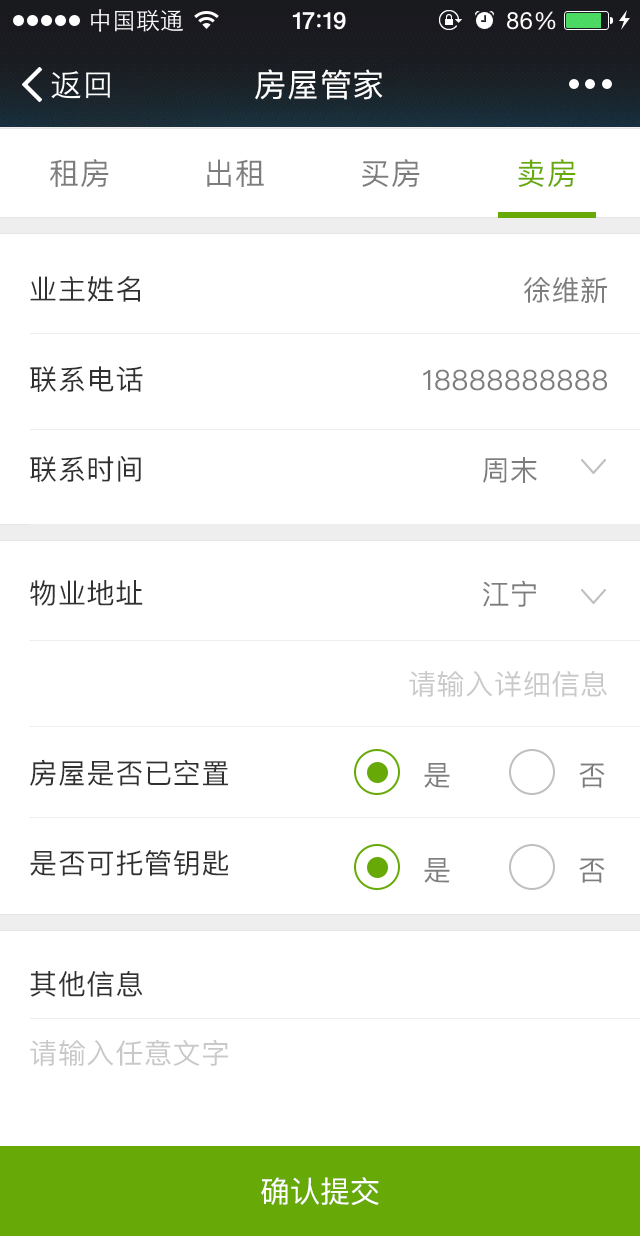
<style>
.page{position:relative;width:640px;height:1236px;background:#ffffff}
.page>*{position:absolute;margin:0}
.t1{font:32px "PingFangSC-Regular";letter-spacing:0.025em;color:#ffffff}
.t2{font:30px "PingFangSC-Regular";letter-spacing:0.025em;color:#7d7d7d}
.t3{font:30px "PingFangSC-Regular";letter-spacing:0.025em;color:#67aa07}
.t4{font:28px/90px "PingFangSC-Regular";letter-spacing:0.025em;color:#313131}
.t5{font:28px/90px "PingFangSC-Regular";letter-spacing:0.025em;color:#7d7d7d}
.t6{font:28px/90px "PingFangSC-Regular";letter-spacing:0.025em;color:#c9c9c9}
.t7{font:28px "PingFangSC-Regular";letter-spacing:0.025em;color:#7d7d7d}
.t8{font:28px "PingFangSC-Regular";letter-spacing:0.025em;color:#313131}
.t9{font:28px "PingFangSC-Regular";letter-spacing:0.025em;color:#c9c9c9}
.t10{font:30px "PingFangSC-Regular";color:#ffffff}
</style>
<div class="page">
<p class="t1" style="left:255px;top:69px;width:128px;height:31px">房屋管家</p>
<p class="t2" style="left:50px;top:159px;width:59px;height:28px">租房</p>
<p class="t2" style="left:207px;top:159px;width:57px;height:28px">出租</p>
<p class="t2" style="left:362px;top:159px;width:58px;height:28px">买房</p>
<p class="t3" style="left:518px;top:159px;width:58px;height:28px">卖房</p>
<p class="t4" style="left:30px;top:276px;width:113px;height:206px">业主姓名<br>联系电话<br>联系时间</p>
<p class="t5" style="left:423px;top:276px;width:184px;height:207px;text-align:right">徐维新<br>18888888888<br>周末</p>
<p class="t4" style="left:30px;top:580px;width:199px;height:296px">物业地址<br><br>房屋是否已空置<br>是否可托管钥匙</p>
<p class="t6" style="left:409px;top:580px;width:198px;height:117px;text-align:right"><span class="t5">江宁       <br></span>请输入详细信息</p>
<p class="t7" style="left:424px;top:763px;width:26px;height:25px">是</p>
<p class="t7" style="left:579px;top:763px;width:26px;height:25px">否</p>
<p class="t7" style="left:424px;top:858px;width:26px;height:25px">是</p>
<p class="t7" style="left:579px;top:858px;width:26px;height:25px">否</p>
<p class="t8" style="left:30px;top:970px;width:113px;height:27px">其他信息</p>
<p class="t9" style="left:30px;top:1039px;width:198px;height:27px">请输入任意文字</p>
<p class="t10" style="left:261px;top:1177px;width:118px;height:28px">确认提交</p>
</div>
